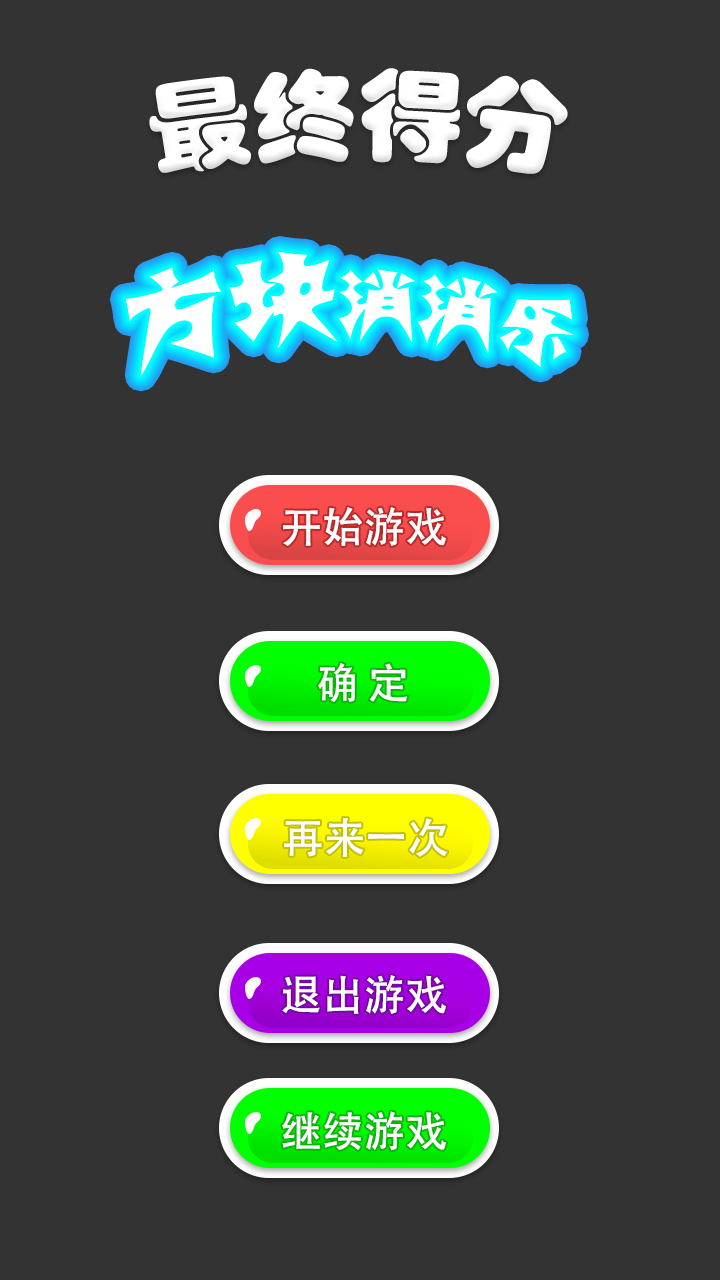
<style>
.page{position:relative;width:720px;height:1280px;background:#333333}
.page>*{position:absolute;margin:0}
.t1{font:100px "STHupo";color:#ffffff}
.t2{font:75px "HYy3gj";color:#ffffff}
.t3{font:100px "HYy3gj";color:#ffffff}
.t4{font:41.7px "AdobeHeitiStd-Regular";color:#ffffff}
</style>
<div class="page">
<p class="t1" style="left:149px;top:68px;width:419px;height:106px">最终得分</p>
<p class="t2" style="left:125px;top:252px;width:449px;height:124px"><span class="t3">方块</span>消消乐</p>
<p class="t4" style="left:283px;top:507px;width:163px;height:39px">开始游戏</p>
<p class="t4" style="left:318px;top:663px;width:90px;height:39px">确 定</p>
<p class="t4" style="left:284px;top:818px;width:164px;height:39px">再来一次</p>
<p class="t4" style="left:282px;top:975px;width:164px;height:39px">退出游戏</p>
<p class="t4" style="left:282px;top:1111px;width:164px;height:40px">继续游戏</p>
</div>
